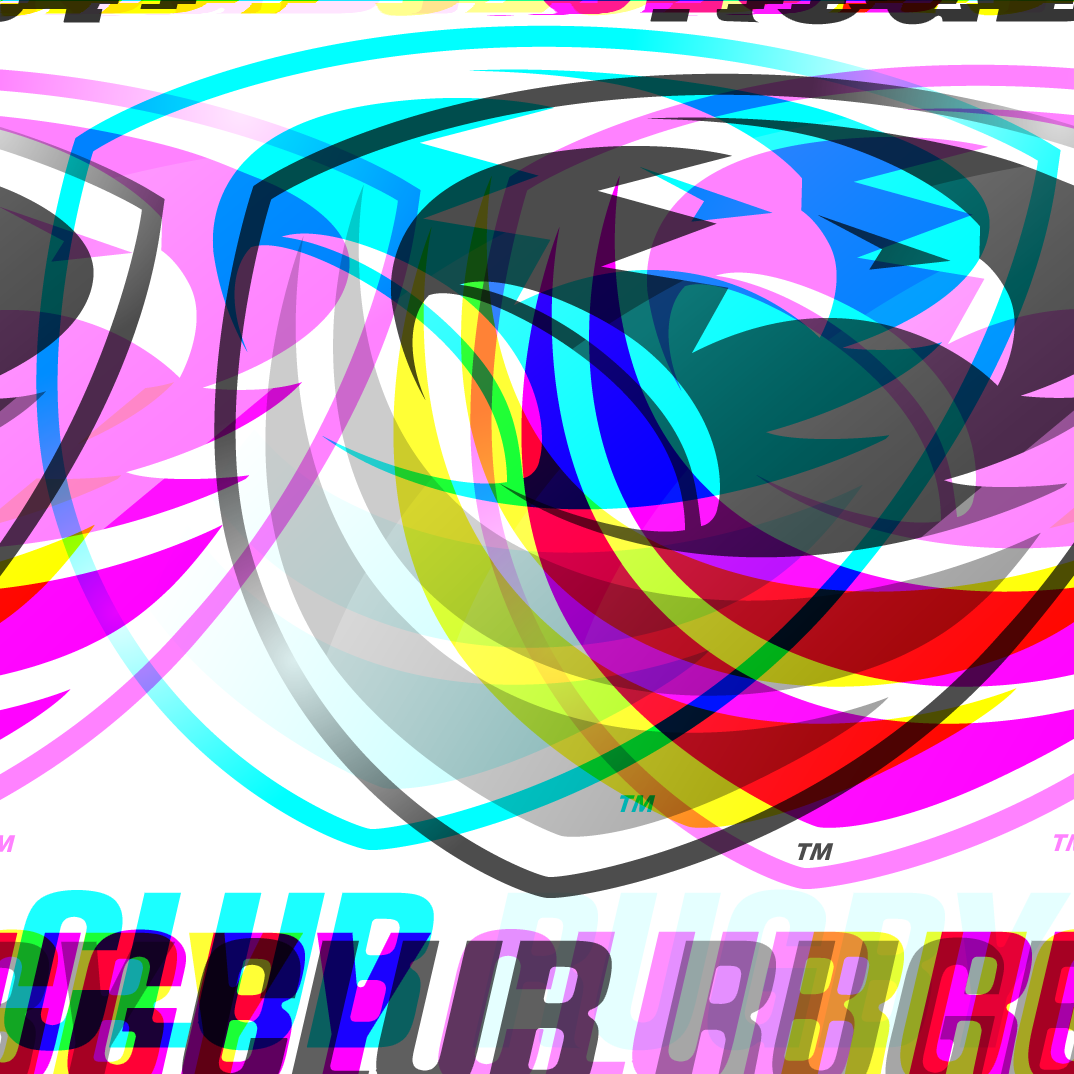
<style>
.page{position:relative;width:1074px;height:1074px;background:#ffffff}
.page>*{position:absolute;margin:0}
.t1{font:222px "AkzidenzGrotConBQ-ExtraBoldItalic";letter-spacing:-0.05em;font-weight:bold}
</style>
<div class="page">
<p class="t1" style="left:0px;top:884px;width:1076px;height:170px">CLUB RUGBY</p>
</div>
